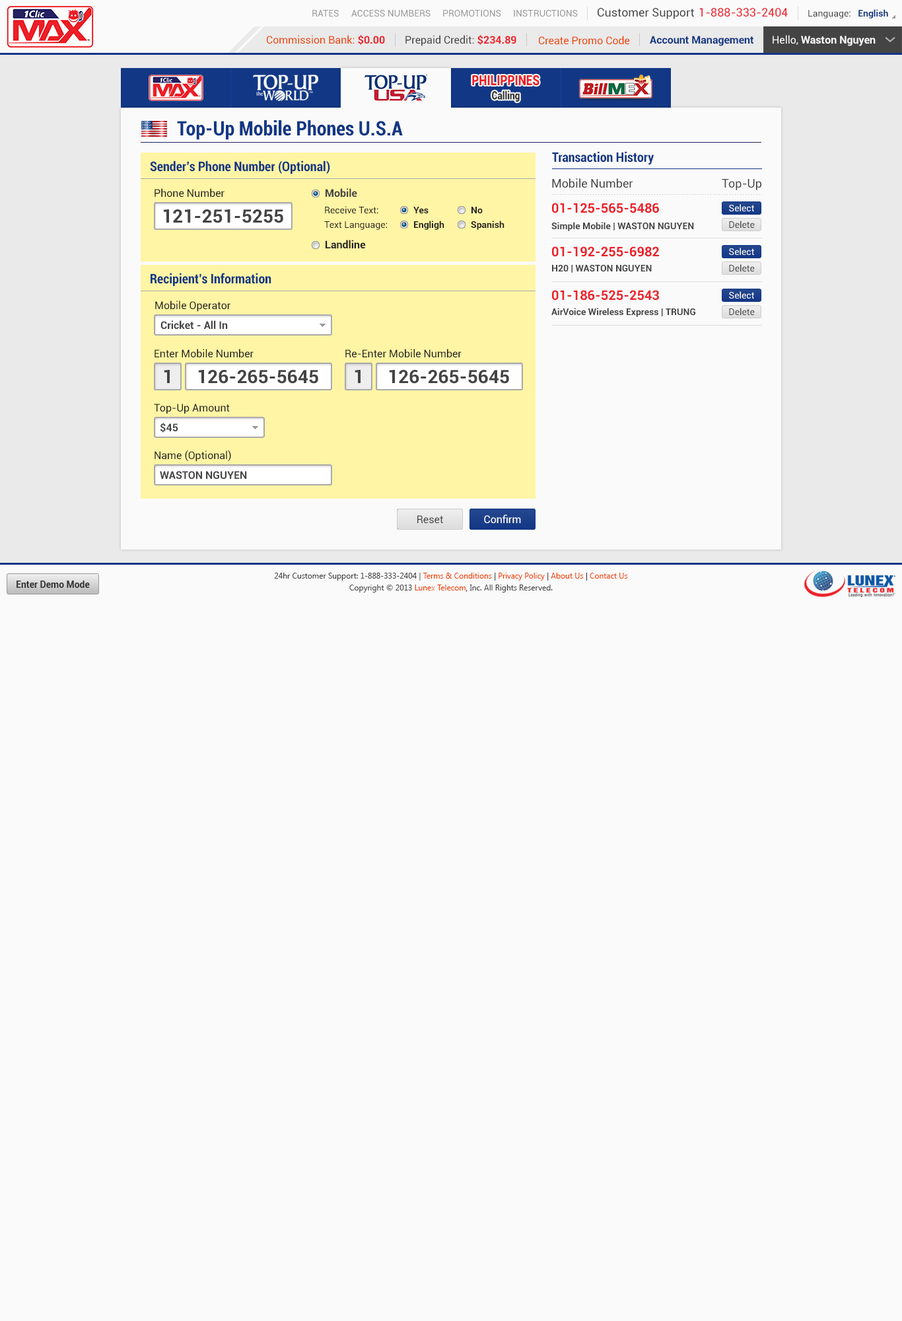
<style>
.page{position:relative;width:902px;height:1321px;background:#fafafa}
.page>*{position:absolute;margin:0}
.t1{font:9.2px "Roboto-Regular";color:#999999}
.t2{font:11.6px "Roboto-Regular";color:#444444}
.t3{font:11.6px "Roboto-Regular";color:#ec2029}
.t4{font:9.2px "Roboto-Regular";color:#444444}
.t5{font:9.2px "Roboto-Bold";color:#123785}
.t6{font:10.6px "Roboto-Regular";color:#ee4400}
.t7{font:10.6px "Roboto-Bold";color:#ec2028}
.t8{font:10.6px "Roboto-Regular";color:#444444}
.t9{font:10.6px "Roboto-Bold";color:#123785}
.t10{font:10.6px "Roboto-Bold";color:#fafafa}
.t11{font:10.6px "Roboto-Regular";color:#fafafa}
.t12{font:14.1px "Roboto-Black";color:#ec2028;scale:0.81 1}
.t13{font:11.3px "Roboto-Black";color:#333333;scale:0.81 1}
.t14{font:19.8px "Roboto-BoldCondensed";color:#123785}
.t15{font:13.2px "Roboto-BoldCondensed";color:#123785}
.t16{font:11.9px "Roboto-Regular";color:#444444}
.t17{font:10.6px "Roboto-Regular";color:#222222}
.t18{font:10.6px "Roboto-Bold";color:#444444}
.t19{font:18.5px "Roboto-Bold";color:#444444}
.t20{font:9.2px "Roboto-Regular";color:#222222}
.t21{font:9.2px "Roboto-Bold";color:#222222}
.t22{font:13.2px "Roboto-Bold";color:#ec2129}
.t23{font:9.2px "Roboto-Regular";color:#fafafa}
.t24{font:9.2px "Roboto-Bold";color:#444444}
.t25{font:10.6px "Roboto-Bold";color:#222222}
.t26{font:10.6px "Roboto-Regular";color:#ffffff}
.t27{font:9.2px "Roboto-Bold";color:#333333}
.t28{font:7.9px/11.9px "SegoeUI";color:#444444}
.t29{font:7.9px/11.9px "SegoeUI";color:#ee4400}
.t30{font:7.9px/11.9px "SegoeUI";color:#333333}
</style>
<div class="page">
<p class="t1" style="left:312px;top:10px;width:27px;height:7px">RATES</p>
<p class="t1" style="left:351px;top:10px;width:80px;height:7px">ACCESS NUMBERS</p>
<p class="t1" style="left:443px;top:10px;width:58px;height:7px">PROMOTIONS</p>
<p class="t1" style="left:514px;top:10px;width:64px;height:7px">INSTRUCTIONS</p>
<p class="t2" style="left:598px;top:8px;width:96px;height:11px">Customer Support</p>
<p class="t3" style="left:700px;top:8px;width:88px;height:9px">1-888-333-2404</p>
<p class="t4" style="left:809px;top:9px;width:80px;height:9px">Language:   <span class="t5">English</span></p>
<p class="t6" style="left:267px;top:35px;width:118px;height:10px">Commission Bank: <span class="t7">$0.00</span></p>
<p class="t8" style="left:406px;top:35px;width:111px;height:11px">Prepaid Credit: <span class="t7">$234.89</span></p>
<p class="t6" style="left:539px;top:36px;width:91px;height:9px">Create Promo Code</p>
<p class="t9" style="left:650px;top:36px;width:104px;height:10px">Account Management</p>
<p class="t10" style="left:773px;top:35px;width:103px;height:11px"><span class="t11">Hello, </span>Waston Nguyen</p>
<p class="t12" style="left:472px;top:75px;width:68px;height:11px">PHILIPPINES</p>
<p class="t13" style="left:492px;top:91px;width:28px;height:11px">Calling</p>
<p class="t14" style="left:177px;top:120px;width:226px;height:20px">Top-Up Mobile Phones U.S.A</p>
<p class="t15" style="left:150px;top:161px;width:180px;height:13px">Sender’s Phone Number (Optional)</p>
<p class="t15" style="left:552px;top:151px;width:103px;height:14px">Transaction History</p>
<p class="t16" style="left:552px;top:178px;width:82px;height:10px">Mobile Number</p>
<p class="t16" style="left:722px;top:179px;width:40px;height:11px">Top-Up</p>
<p class="t17" style="left:155px;top:188px;width:70px;height:10px">Phone Number</p>
<p class="t18" style="left:326px;top:188px;width:31px;height:10px">Mobile</p>
<p class="t19" style="left:163px;top:209px;width:120px;height:14px">121-251-5255</p>
<p class="t20" style="left:325px;top:206px;width:54px;height:7px">Receive Text:</p>
<p class="t21" style="left:414px;top:207px;width:15px;height:6px">Yes</p>
<p class="t21" style="left:472px;top:207px;width:11px;height:6px">No</p>
<p class="t22" style="left:552px;top:203px;width:107px;height:10px">01-125-565-5486</p>
<p class="t23" style="left:729px;top:204px;width:25px;height:7px">Select</p>
<p class="t20" style="left:324px;top:221px;width:63px;height:9px">Text Language:</p>
<p class="t21" style="left:414px;top:221px;width:31px;height:9px">Engligh</p>
<p class="t21" style="left:471px;top:221px;width:34px;height:9px">Spanish</p>
<p class="t24" style="left:552px;top:222px;width:142px;height:9px">Simple Mobile | WASTON NGUYEN</p>
<p class="t4" style="left:729px;top:221px;width:26px;height:7px">Delete</p>
<p class="t25" style="left:326px;top:240px;width:40px;height:9px">Landline</p>
<p class="t22" style="left:552px;top:246px;width:107px;height:11px">01-192-255-6982</p>
<p class="t23" style="left:729px;top:248px;width:25px;height:7px">Select</p>
<p class="t24" style="left:552px;top:265px;width:100px;height:8px">H20 | WASTON NGUYEN</p>
<p class="t4" style="left:729px;top:264px;width:26px;height:8px">Delete</p>
<p class="t15" style="left:151px;top:273px;width:121px;height:13px">Recipient’s Information</p>
<p class="t22" style="left:552px;top:290px;width:107px;height:11px">01-186-525-2543</p>
<p class="t23" style="left:729px;top:291px;width:25px;height:8px">Select</p>
<p class="t17" style="left:155px;top:301px;width:76px;height:11px">Mobile Operator</p>
<p class="t24" style="left:552px;top:308px;width:144px;height:9px">AirVoice Wireless Express | TRUNG</p>
<p class="t4" style="left:729px;top:308px;width:26px;height:7px">Delete</p>
<p class="t18" style="left:161px;top:320px;width:67px;height:9px">Cricket - All In</p>
<p class="t17" style="left:155px;top:349px;width:99px;height:9px">Enter Mobile Number</p>
<p class="t17" style="left:346px;top:349px;width:116px;height:9px">Re-Enter Mobile Number</p>
<p class="t19" style="left:164px;top:370px;width:6px;height:13px">1</p>
<p class="t19" style="left:198px;top:370px;width:120px;height:14px">126-265-5645</p>
<p class="t19" style="left:355px;top:370px;width:6px;height:13px">1</p>
<p class="t19" style="left:389px;top:370px;width:120px;height:14px">126-265-5645</p>
<p class="t17" style="left:154px;top:404px;width:76px;height:10px">Top-Up Amount</p>
<p class="t18" style="left:160px;top:423px;width:18px;height:10px">$45</p>
<p class="t17" style="left:155px;top:450px;width:76px;height:12px">Name (Optional)</p>
<p class="t18" style="left:160px;top:471px;width:87px;height:8px">WASTON NGUYEN</p>
<p class="t8" style="left:418px;top:515px;width:25px;height:8px">Reset</p>
<p class="t26" style="left:484px;top:515px;width:37px;height:8px">Confirm</p>
<p class="t27" style="left:17px;top:581px;width:73px;height:7px">Enter Demo Mode</p>
<p class="t28" style="left:274px;top:573px;width:354px;height:20px;text-align:center">24hr Customer Support: 1-888-333-2404 | <span class="t29">Terms &amp; Conditions</span><span class="t30"> | </span><span class="t29">Privacy Policy</span><span class="t30"> | </span><span class="t29">About Us</span><span class="t30"> | </span><span class="t29">Contact Us<br></span>Copyright © 2013 <span class="t29">Lunex Telecom</span><span class="t30">,</span> Inc. All Rights Reserved.</p>
</div>
